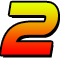
<style>
.page{position:relative;width:60px;height:58px}
.page>*{position:absolute;margin:0}
.t1{font:100px "Bitsumishi";letter-spacing:-0.08em;font-style:italic;scale:0.93 1}
</style>
<div class="page">
<p class="t1" style="left:1px;top:2px;width:57px;height:53px">2</p>
</div>
